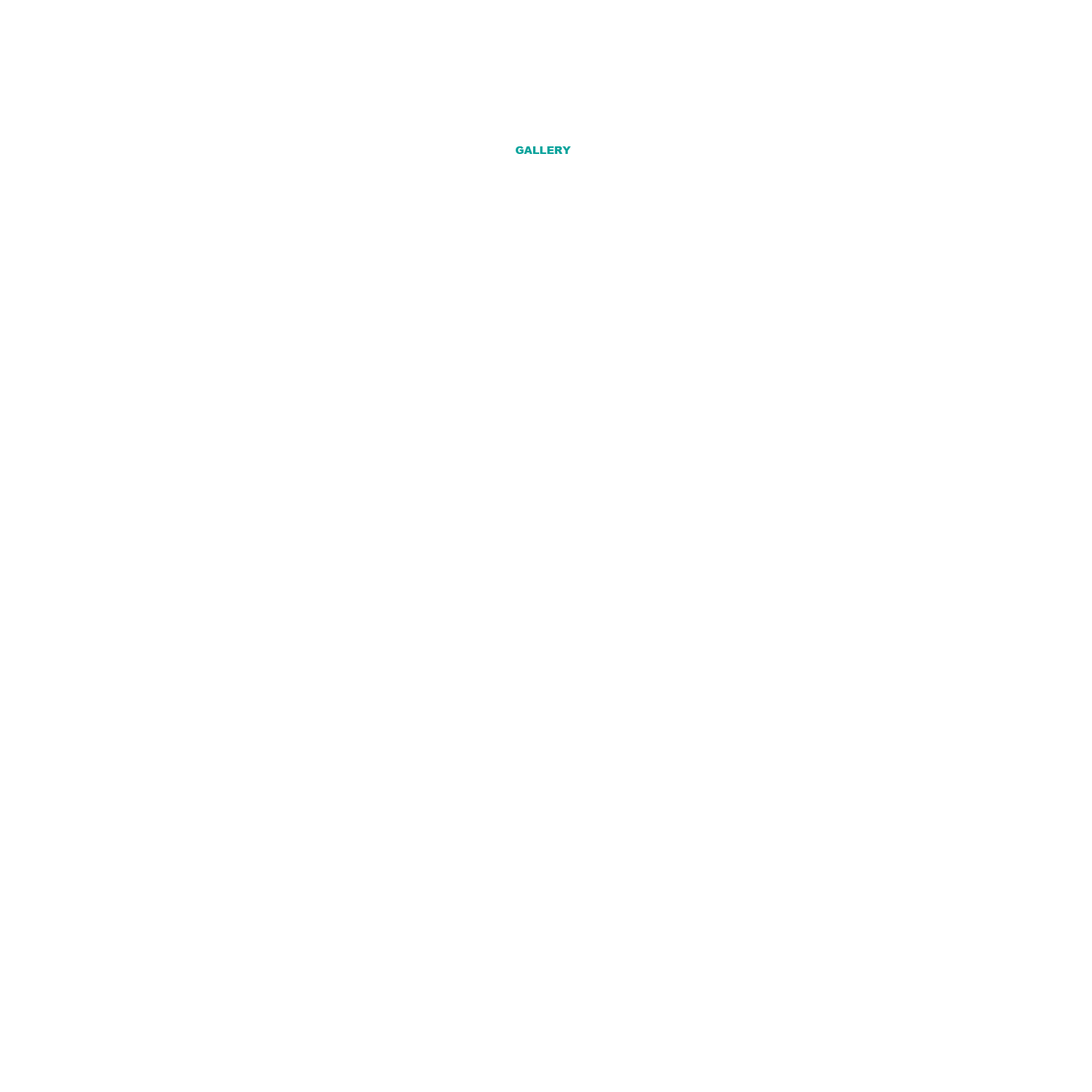
<style>
.page{position:relative;width:1092px;height:1092px;background:#ffffff}
.page>*{position:absolute;margin:0}
.t1{font:10.6px "Arial-Black";color:#0ba39c}
</style>
<div class="page">
<p class="t1" style="left:516px;top:146px;width:55px;height:8px">GALLERY</p>
</div>
